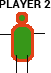
<style>
.page{position:relative;width:51px;height:73px;background:#ffffff}
.page>*{position:absolute;margin:0}
.t1{font:11px "Roboto-Bold";letter-spacing:0.025em;color:#000000}
</style>
<div class="page">
<p class="t1" style="left:0px;top:0px;width:51px;height:8px">PLAYER 2</p>
</div>
